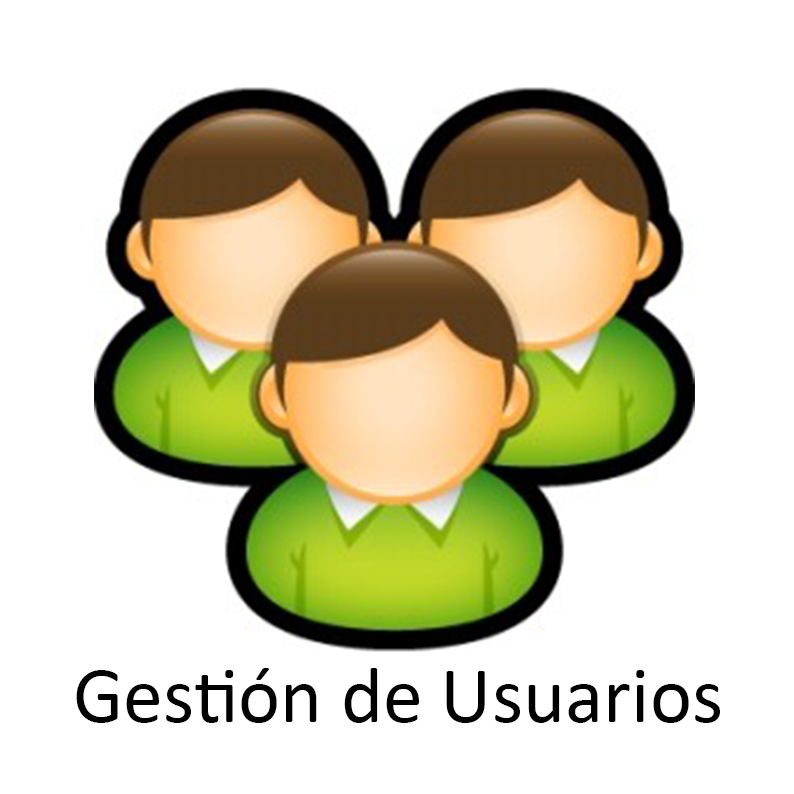
<style>
.page{position:relative;width:794px;height:794px;background:#ffffff}
.page>*{position:absolute;margin:0}
.t1{font:80px "Calibri";color:#000000}
</style>
<div class="page">
<p class="t1" style="left:76px;top:668px;width:644px;height:55px">Gestión de Usuarios</p>
</div>
